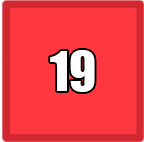
<style>
.page{position:relative;width:144px;height:142px;background:#ff3840}
.page>*{position:absolute;margin:0}
.t1{font:50px "Impact";color:#ffffff}
</style>
<div class="page">
<p class="t1" style="left:50px;top:50px;width:45px;height:42px">19</p>
</div>
